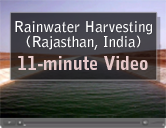
<style>
.page{position:relative;width:166px;height:128px}
.page>*{position:absolute;margin:0}
.t1{font:15.1px/15px "BellGothicStd-Bold";color:#ffffff}
.t2{font:17.7px "BellGothicStd-Black";color:#e5c8c9}
</style>
<div class="page">
<p class="t1" style="left:15px;top:21px;width:137px;height:29px;text-align:center">Rainwater Harvesting<br>(Rajasthan, India)</p>
<p class="t2" style="left:18px;top:56px;width:130px;height:14px">11-minute Video</p>
</div>
